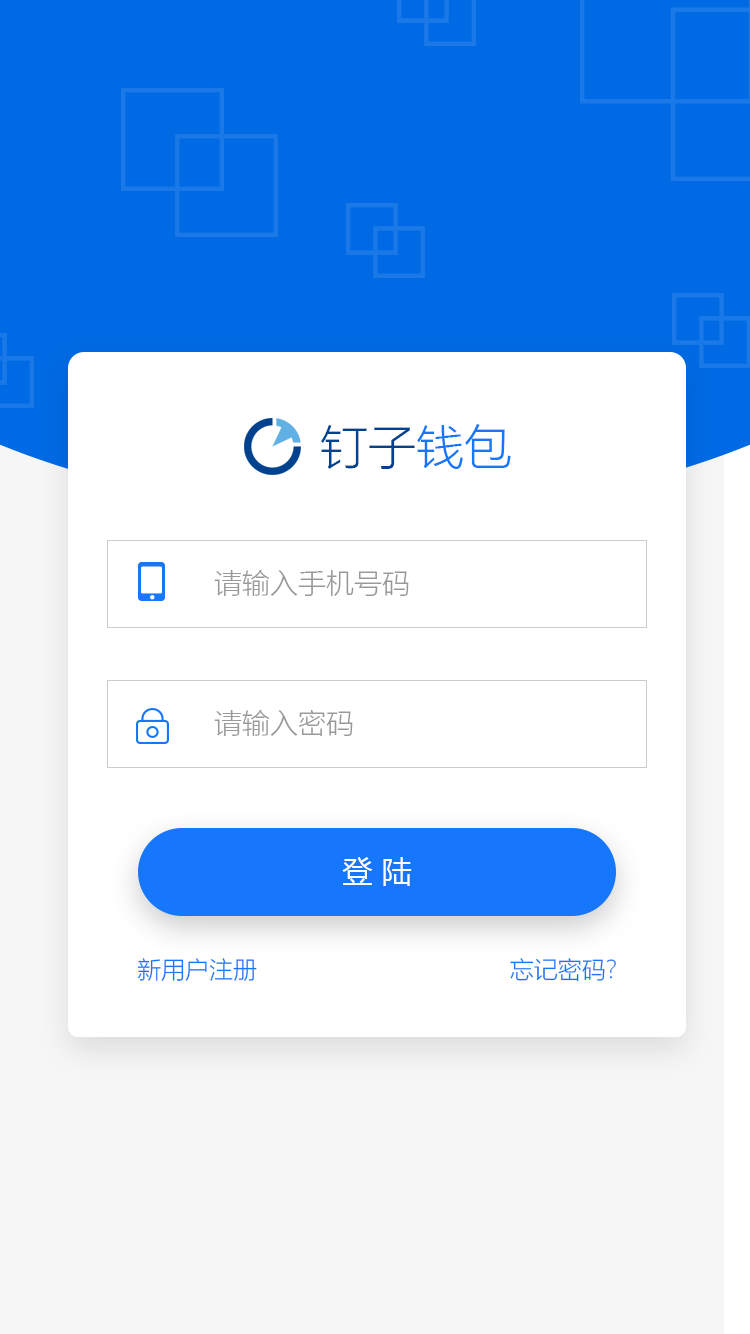
<style>
.page{position:relative;width:750px;height:1334px;background:#ffffff}
.page>*{position:absolute;margin:0}
.t1{font:48px "MicrosoftYaHeiLight";color:#00428e}
.t2{font:48px "MicrosoftYaHeiLight";color:#1777fb}
.t3{font:28px "MicrosoftYaHeiLight";color:#999999}
.t4{font:30px "MicrosoftYaHei";color:#ffffff}
.t5{font:24px "MicrosoftYaHeiLight";color:#1777fb}
</style>
<div class="page">
<p class="t1" style="left:321px;top:424px;width:190px;height:45px">钉子<span class="t2">钱包</span></p>
<p class="t3" style="left:214px;top:570px;width:195px;height:26px">请输入手机号码</p>
<p class="t3" style="left:214px;top:710px;width:139px;height:26px">请输入密码</p>
<p class="t4" style="left:342px;top:857px;width:70px;height:29px">登 陆</p>
<p class="t5" style="left:137px;top:958px;width:120px;height:23px">新用户注册</p>
<p class="t5" style="left:510px;top:958px;width:106px;height:24px">忘记密码?</p>
</div>
